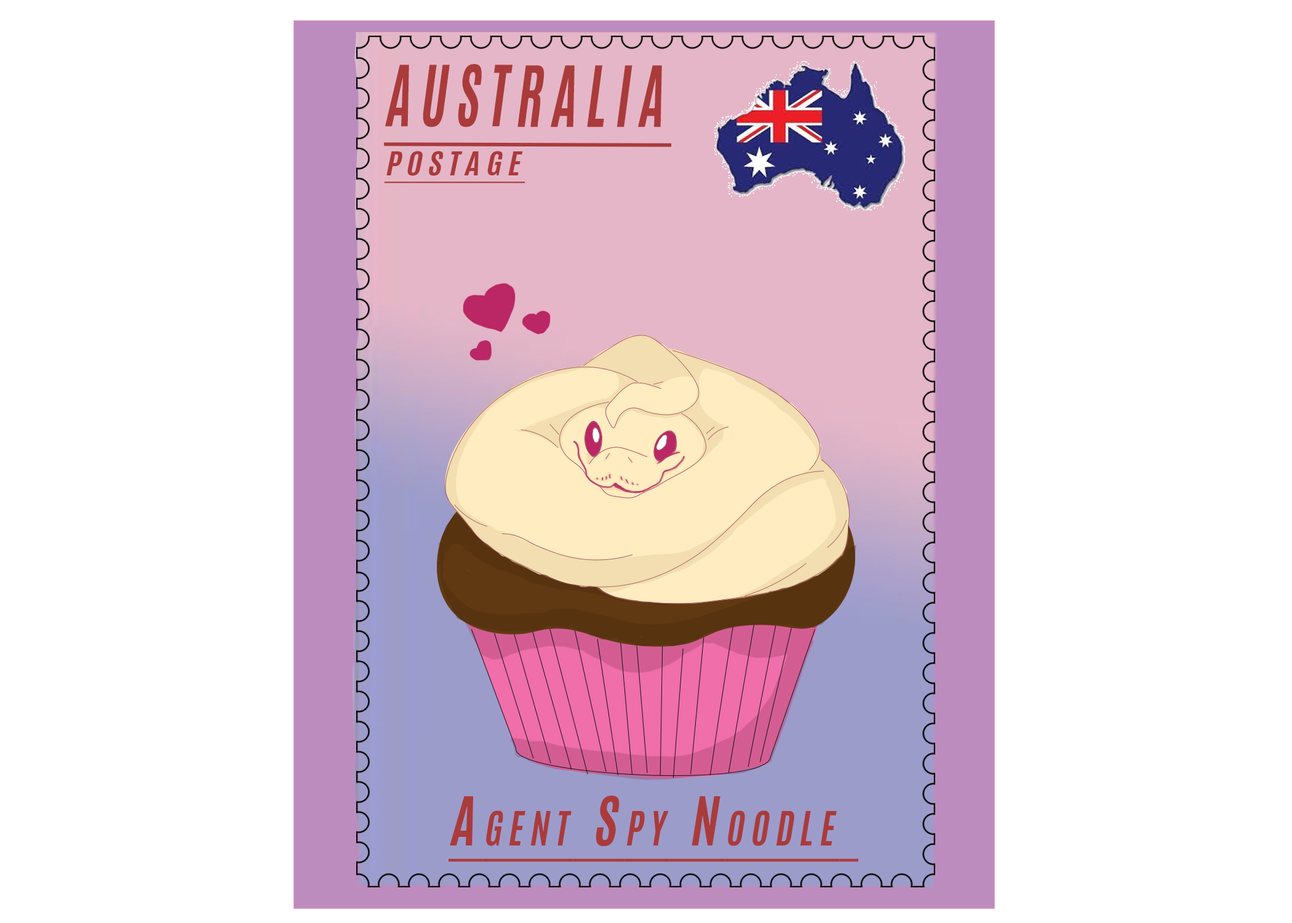
<style>
.page{position:relative;width:1292px;height:923px;background:#ffffff}
.page>*{position:absolute;margin:0}
.t1{font:102px "Antonio-Bold";letter-spacing:0.18em;color:#aa3b3b;font-variant:small-caps;font-style:italic;text-decoration:underline;scale:0.74 1}
.t2{font:39.3px "Antonio-Bold";letter-spacing:0.18em;color:#aa3b3b;font-variant:small-caps;font-style:italic;text-decoration:underline;scale:1.17 1}
.t3{font:57.2px "Antonio-Bold";letter-spacing:0.18em;color:#aa3b3b;font-variant:small-caps;font-style:italic;text-decoration:underline;scale:0.91 1}
</style>
<div class="page">
<p class="t1" style="left:384px;top:64px;width:288px;height:83px">australia</p>
<p class="t2" style="left:384px;top:151px;width:141px;height:32px">postage</p>
<p class="t3" style="left:449px;top:796px;width:409px;height:66px">Agent Spy Noodle</p>
</div>
